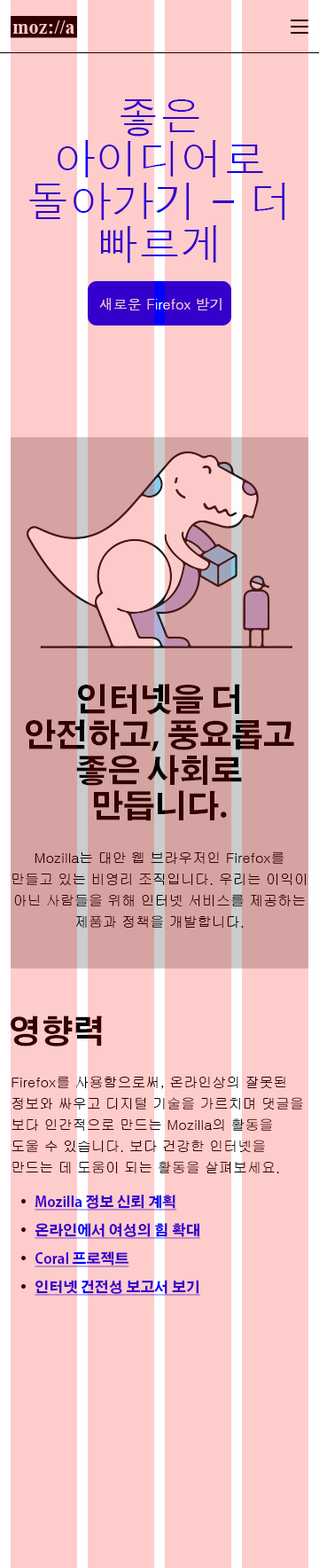
<style>
.page{position:relative;width:319px;height:1568px;background:#ffcccc}
.page>*{position:absolute;margin:0}
.t1{font:42.6px/42.6px "Dotum";color:#3300cc}
.t2{font:14.2px "Dotum";color:#fecbcb}
.t3{font:31.9px/35.5px "AdobeGothicStd-Bold";color:#330000}
.t4{font:14.2px/21.3px "Gulim";color:#330000}
.t5{font:31.9px "AdobeGothicStd-Bold";color:#330000}
.t6{font:14.2px "AdobeGothicStd-Bold";color:#3300cc;text-decoration:underline}
</style>
<div class="page">
<p class="t1" style="left:29px;top:99px;width:257px;height:164px;text-align:center">좋은 아이디어로 돌아가기 - 더 빠르게</p>
<p class="t2" style="left:99px;top:298px;width:123px;height:12px">새로운 Firefox 받기</p>
<p class="t3" style="left:26px;top:684px;width:268px;height:137px;text-align:center">인터넷을 더 안전하고, 풍요롭고 좋은 사회로 만듭니다.</p>
<p class="t4" style="left:12px;top:851px;width:295px;height:77px;text-align:center">Mozilla는 대안 웹 브라우저인 Firefox를 만들고 있는 비영리 조직입니다. 우리는 이익이 아닌 사람들을 위해 인터넷 서비스를 제공하는 제품과 정책을 개발합니다.</p>
<p class="t5" style="left:11px;top:1015px;width:91px;height:32px">영향력</p>
<p class="t4" style="left:12px;top:1076px;width:291px;height:97px">Firefox를 사용함으로써, 온라인상의 잘못된 정보와 싸우고 디지털 기술을 가르치며 댓글을 보다 인간적으로 만드는 Mozilla의 활동을 도울 수 있습니다. 보다 건강한 인터넷을 만드는 데 도움이 되는 활동을 살펴보세요.</p>
<p class="t6" style="left:35px;top:1195px;width:142px;height:16px">Mozilla 정보 신뢰 계획</p>
<p class="t6" style="left:35px;top:1223px;width:165px;height:16px">온라인에서 여성의 힘 확대</p>
<p class="t6" style="left:35px;top:1251px;width:94px;height:16px">Coral 프로젝트</p>
<p class="t6" style="left:35px;top:1280px;width:165px;height:16px">인터넷 건전성 보고서 보기</p>
</div>
